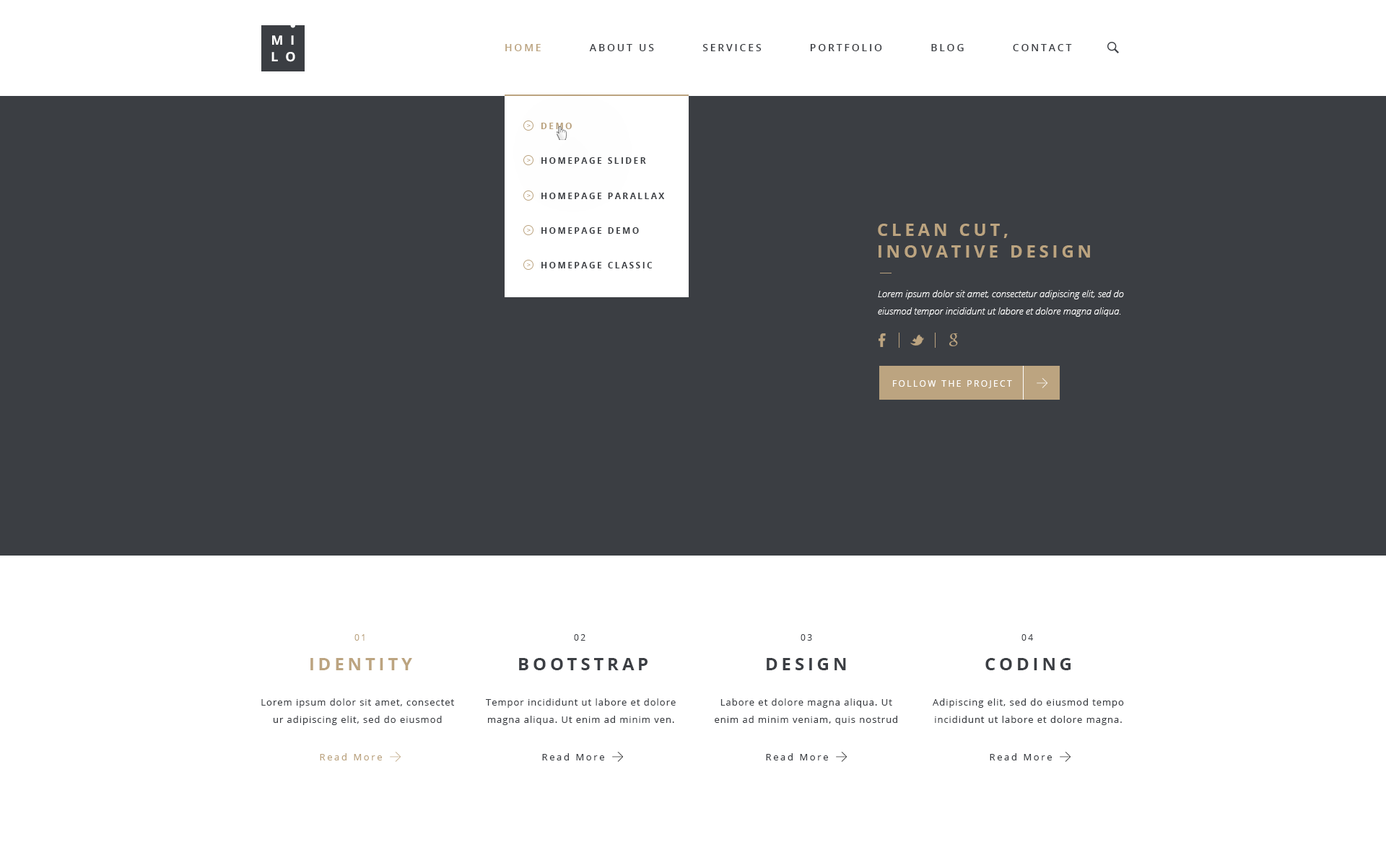
<style>
.page{position:relative;width:1386px;height:860px;background:#3b3e43}
.page>*{position:absolute;margin:0}
.t1{font:13px "OpenSans-Bold";letter-spacing:0.55em;color:#ffffff;text-transform:uppercase}
.t2{font:10.1px "OpenSans-Semibold";letter-spacing:0.2em;color:#3b3e43;text-transform:uppercase}
.t3{font:10.1px "OpenSans-Semibold";letter-spacing:0.2em;color:#bca480;text-transform:uppercase}
.t4{font:8.7px "OpenSans-Bold";letter-spacing:0.2em;color:#bca480;text-transform:uppercase}
.t5{font:8.7px "OpenSans-Bold";letter-spacing:0.2em;color:#3b3e43;text-transform:uppercase}
.t6{font:17.3px/21.7px "OpenSans-Bold";letter-spacing:0.2em;color:#bca480;text-transform:uppercase}
.t7{font:9.4px/17.3px "OpenSansLight-Italic";color:#ffffff}
.t8{font:8.7px "OpenSans";letter-spacing:0.2em;color:#ffffff;text-transform:uppercase}
.t9{font:8.7px "OpenSans";letter-spacing:0.2em;color:#bca480;text-transform:uppercase}
.t10{font:8.7px "OpenSans";letter-spacing:0.2em;color:#3b3e43;text-transform:uppercase}
.t11{font:17.3px "OpenSans-Bold";letter-spacing:0.2em;color:#bca480;text-transform:uppercase}
.t12{font:17.3px "OpenSans-Bold";letter-spacing:0.2em;color:#3b3e43;text-transform:uppercase}
.t13{font:9.4px/17.3px "OpenSans";letter-spacing:0.075em;color:#3b3e43}
.t14{font:9.4px "OpenSans";letter-spacing:0.2em;color:#bca480}
.t15{font:9.4px "OpenSans";letter-spacing:0.2em;color:#3b3e43}
</style>
<div class="page">
<p class="t1" style="left:272px;top:35px;width:22px;height:10px">mi</p>
<p class="t1" style="left:271px;top:52px;width:24px;height:10px">lo</p>
<p class="t2" style="left:505px;top:44px;width:567px;height:7px"><span class="t3">Home          </span>About Us          Services          Portfolio          Blog          Contact</p>
<p class="t4" style="left:541px;top:123px;width:31px;height:6px">Demo</p>
<p class="t5" style="left:541px;top:157px;width:105px;height:7px">Homepage Slider</p>
<p class="t5" style="left:541px;top:193px;width:124px;height:6px">Homepage Parallax</p>
<p class="t5" style="left:541px;top:227px;width:98px;height:7px">Homepage Demo</p>
<p class="t6" style="left:878px;top:224px;width:212px;height:34px">Clean cut, <br>Inovative Design</p>
<p class="t5" style="left:541px;top:262px;width:112px;height:7px">Homepage Classic</p>
<p class="t7" style="left:878px;top:290px;width:246px;height:27px">Lorem ipsum dolor sit amet, consectetur adipiscing elit, sed do eiusmod tempor incididunt ut labore et dolore magna aliqua.</p>
<p class="t8" style="left:893px;top:380px;width:119px;height:8px">Follow the project</p>
<p class="t9" style="left:354px;top:634px;width:11px;height:7px">01</p>
<p class="t10" style="left:574px;top:634px;width:11px;height:7px">02</p>
<p class="t10" style="left:800px;top:634px;width:12px;height:7px">03</p>
<p class="t10" style="left:1021px;top:634px;width:12px;height:7px">04</p>
<p class="t11" style="left:310px;top:658px;width:102px;height:13px">Identity</p>
<p class="t12" style="left:519px;top:658px;width:128px;height:13px">Bootstrap</p>
<p class="t12" style="left:767px;top:658px;width:79px;height:13px">Design</p>
<p class="t12" style="left:985px;top:658px;width:85px;height:13px">Coding</p>
<p class="t13" style="left:261px;top:699px;width:193px;height:26px;text-align:center">Lorem ipsum dolor sit amet, consectet ur adipiscing elit, sed do eiusmod</p>
<p class="t13" style="left:486px;top:699px;width:190px;height:26px;text-align:center">Tempor incididunt ut labore et dolore magna aliqua. Ut enim ad minim ven.</p>
<p class="t13" style="left:715px;top:699px;width:182px;height:26px;text-align:center">Labore et dolore magna aliqua. Ut enim ad minim veniam, quis nostrud</p>
<p class="t13" style="left:933px;top:699px;width:191px;height:26px;text-align:center">Adipiscing elit, sed do eiusmod tempo incididunt ut labore et dolore magna.</p>
<p class="t14" style="left:320px;top:754px;width:62px;height:7px">Read More</p>
<p class="t15" style="left:542px;top:754px;width:62px;height:7px">Read More</p>
<p class="t15" style="left:766px;top:754px;width:62px;height:7px">Read More</p>
<p class="t15" style="left:990px;top:754px;width:62px;height:7px">Read More</p>
</div>
